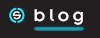
<style>
.page{position:relative;width:100px;height:38px;background:#231f20}
.page>*{position:absolute;margin:0}
.t1{font:18.8px "Insignia";letter-spacing:0.2em;color:#ffffff}
</style>
<div class="page">
<p class="t1" style="left:34px;top:9px;width:49px;height:16px">blog</p>
</div>
